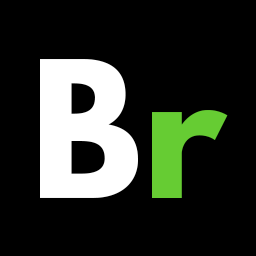
<style>
.page{position:relative;width:256px;height:256px;background:#000000}
.page>*{position:absolute;margin:0}
.t1{font:168px "LeagueSpartan-Bold";color:#ffffff}
.t2{font:168px "LeagueSpartan-Bold";color:#66cc33}
</style>
<div class="page">
<p class="t1" style="left:40px;top:59px;width:188px;height:139px">B<span class="t2">r</span></p>
</div>
